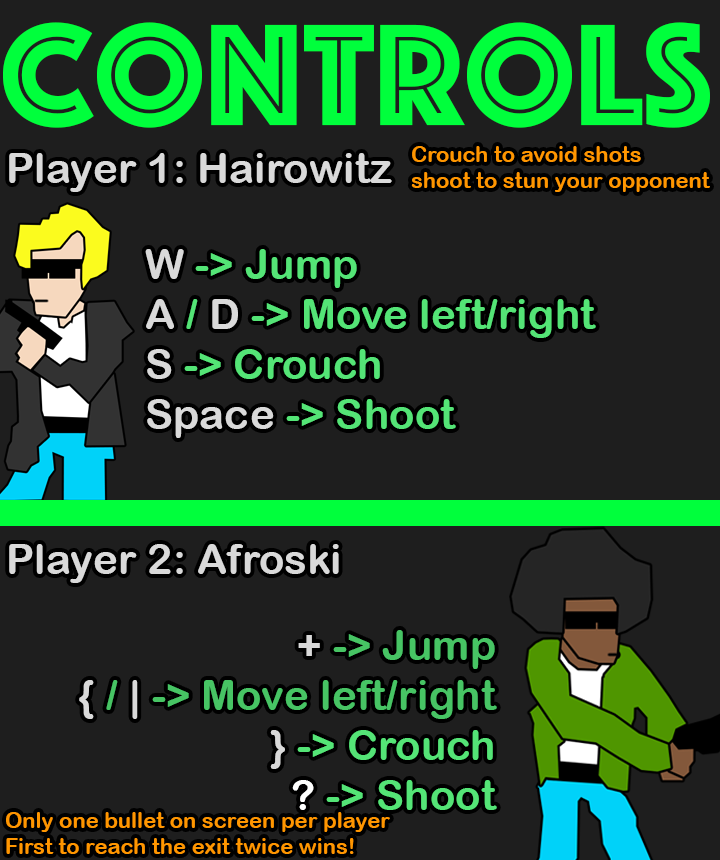
<style>
.page{position:relative;width:720px;height:860px;background:#1e1e1e}
.page>*{position:absolute;margin:0}
.t1{font:150px "Phosphate-Inline";letter-spacing:0.01em;color:#00ff3c}
.t2{font:21.6px "ArialRoundedMTBold";letter-spacing:0.01em;color:#ff9600}
.t3{font:41.7px "ArialRoundedMTBold";letter-spacing:0.01em;color:#d9d9d9}
.t4{font:41.7px "ArialRoundedMTBold";letter-spacing:0.01em;color:#54e476}
.t5{font:41.7px "ArialRoundedMTBold";letter-spacing:0.01em;color:#47c464}
.t6{font:41.7px "ArialRoundedMTBold";letter-spacing:0.01em;color:#fefffe}
</style>
<div class="page">
<p class="t1" style="left:3px;top:22px;width:707px;height:106px">controls</p>
<p class="t2" style="left:411px;top:146px;width:299px;height:46px">Crouch to avoid shots<br>shoot to stun your opponent</p>
<p class="t3" style="left:9px;top:153px;width:383px;height:39px">Player 1: Hairowitz</p>
<p class="t4" style="left:145px;top:249px;width:451px;height:189px"><span class="t3">W </span>-&gt; Jump<br><span class="t3">A </span>/<span class="t3"> D </span>-&gt; Move left/right<br><span class="t3">S </span>-&gt; Crouch<span class="t3"> <br>Space </span>-&gt; Shoot</p>
<p class="t3" style="left:9px;top:544px;width:330px;height:39px">Player 2: Afroski</p>
<p class="t5" style="left:79px;top:630px;width:418px;height:180px;text-align:right"><span class="t3">+ </span>-&gt; Jump<br><span class="t3">{ </span>/<span class="t3"> | </span>-&gt; Move left/right<br><span class="t3">} </span><span class="t4">-&gt; Crouch<br></span><span class="t6">?</span><span class="t4"> -&gt; Shoot</span></p>
<p class="t2" style="left:6px;top:812px;width:384px;height:42px">Only one bullet on screen per player<br>First to reach the exit twice wins!</p>
</div>
